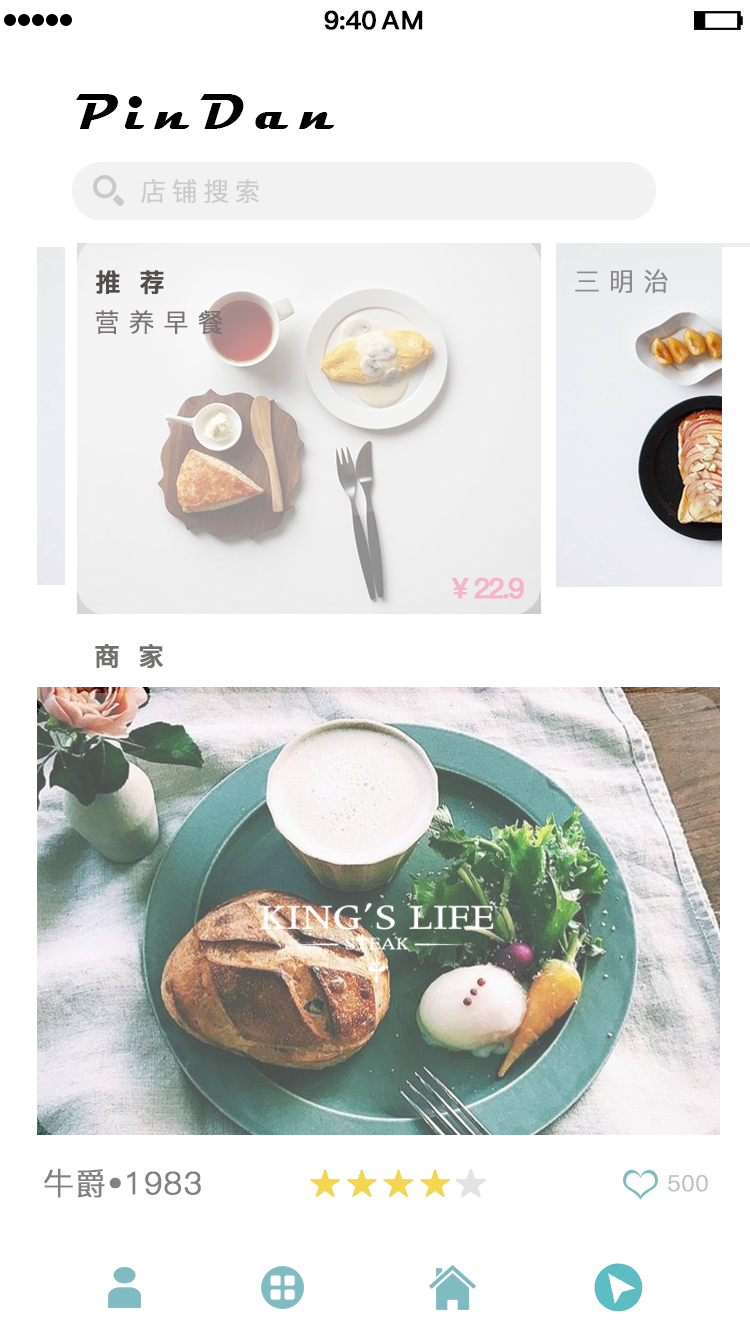
<style>
.page{position:relative;width:750px;height:1334px;background:#ffffff}
.page>*{position:absolute;margin:0}
.t1{font:25.4px "PingFang-SC-Bold";letter-spacing:-0.028em;color:#000000;font-weight:bold}
.t2{font:25.4px "PingFang-SC-Bold";letter-spacing:0.052em;color:#000000;font-weight:bold}
.t3{font:51.5px "Magneto-Bold";letter-spacing:0.214em;color:#000000}
.t4{font:25.4px "PingFang-SC-Regular";letter-spacing:0.212em;color:#cacaca;font-weight:bold}
.t5{font:25.4px "PingFang-SC-Bold";letter-spacing:0.712em;color:#514d4d;font-weight:bold}
.t6{font:25.4px "PingFang-SC-Regular";letter-spacing:0.332em;color:#8c8a8a;font-weight:bold}
.t7{font:25.4px "PingFang-SC-Regular";letter-spacing:0.332em;color:#7a7272;font-weight:bold}
.t8{font:28px "PingFang-SC-Bold";letter-spacing:-0.108em;color:#f6b3cb;font-weight:bold}
.t9{font:25.4px "PingFang-SC-Bold";letter-spacing:0.712em;color:#726f6f;font-weight:bold}
.t10{font:31px "PingFang-SC-Regular";letter-spacing:0.012em;color:#828181;font-weight:bold}
.t11{font:22px "PingFang-SC-Regular";letter-spacing:0.012em;color:#c0c0c0;font-weight:bold}
</style>
<div class="page">
<p class="t1" style="left:324px;top:10px;width:52px;height:20px">9:40</p>
<p class="t2" style="left:381px;top:10px;width:42px;height:20px">AM</p>
<p class="t3" style="left:76px;top:94px;width:259px;height:35px">PinDan</p>
<p class="t4" style="left:141px;top:179px;width:118px;height:24px">店铺搜索</p>
<p class="t5" style="left:96px;top:270px;width:68px;height:25px">推荐</p>
<p class="t6" style="left:575px;top:269px;width:93px;height:24px">三明治</p>
<p class="t7" style="left:95px;top:310px;width:128px;height:24px">营养早餐</p>
<p class="t8" style="left:451px;top:577px;width:73px;height:22px">¥ 22.9</p>
<p class="t9" style="left:95px;top:644px;width:68px;height:24px">商家</p>
<p class="t10" style="left:44px;top:1168px;width:157px;height:30px">牛爵•1983</p>
<p class="t11" style="left:668px;top:1174px;width:40px;height:18px">500</p>
</div>
